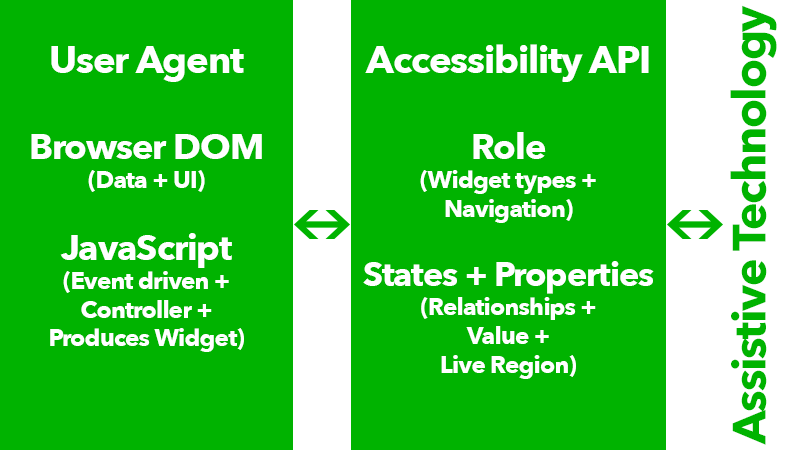
<style>
.page{position:relative;width:800px;height:450px;background:#00b300}
.page>*{position:absolute;margin:0}
.t1{font:46.3px "AvenirNext-Bold";letter-spacing:-0.03em;color:#00b300}
.t2{font:24px "AvenirNext-Bold";letter-spacing:-0.03em;color:#ffffff}
.t3{font:36px "AvenirNext-Bold";letter-spacing:-0.03em;color:#ffffff}
.t4{font:38px "AvenirNext-Bold";letter-spacing:-0.03em;color:#ffffff}
.t5{font:34px "AvenirNext-Bold";letter-spacing:-0.03em;color:#ffffff}
</style>
<div class="page">
<p class="t1" style="left:730px;top:5px;width:47px;height:440px;rotate:-90deg">Assistive Technology</p>
<p class="t2" style="left:31px;top:46px;width:231px;height:306px;text-align:center"><span class="t3"><br></span><span class="t4">User Agent<br></span><span class="t3"><br>Browser DOM<br></span>(Data + UI)<br><br><span class="t3">JavaScript<br></span>(Event driven +<br>Controller + <br>Produces Widget)</p>
<p class="t2" style="left:363px;top:44px;width:291px;height:335px;text-align:center"><span class="t3"><br></span><span class="t4">Accessibility API<br></span><span class="t3"><br>Role<br></span>(Widget types + <br>Navigation)<br><br><span class="t5">States + Properties<br></span>(Relationships +<br>Value +<br>Live Region)</p>
</div>
